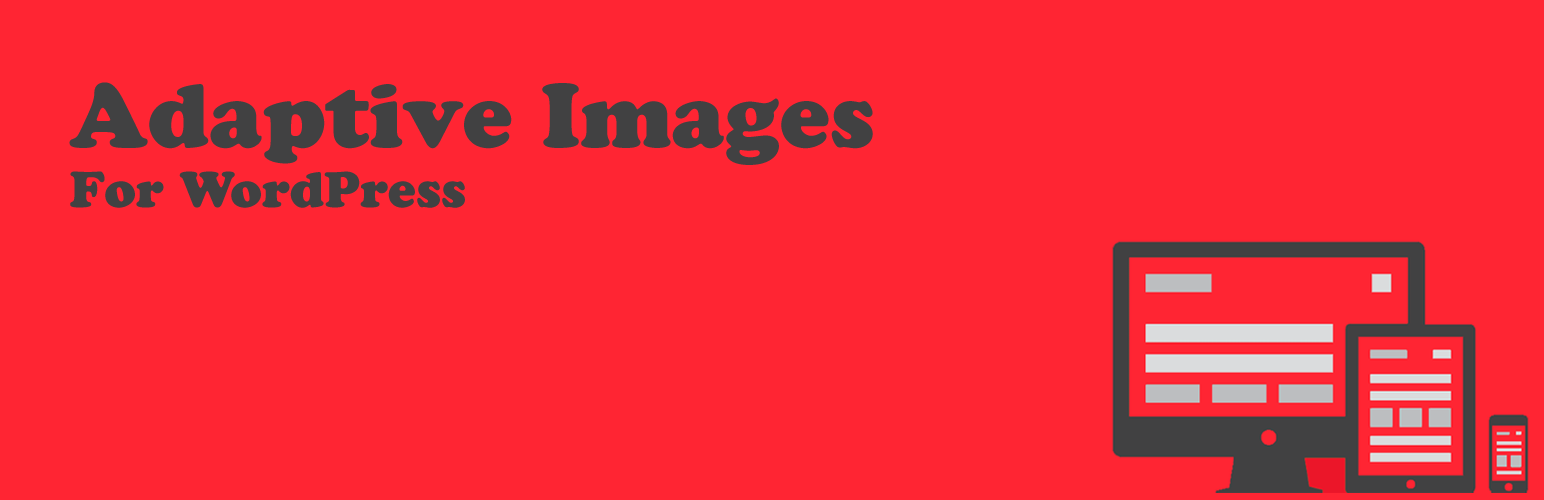
<style>
.page{position:relative;width:1544px;height:500px;background:#ff2533}
.page>*{position:absolute;margin:0}
.t1{font:90px/60px "CooperBlackStd";color:#414142}
.t2{font:50px/60px "CooperBlackStd";color:#414142}
</style>
<div class="page">
<p class="t1" style="left:69px;top:82px;width:804px;height:126px">Adaptive Images<br><span class="t2">For WordPress</span></p>
</div>
